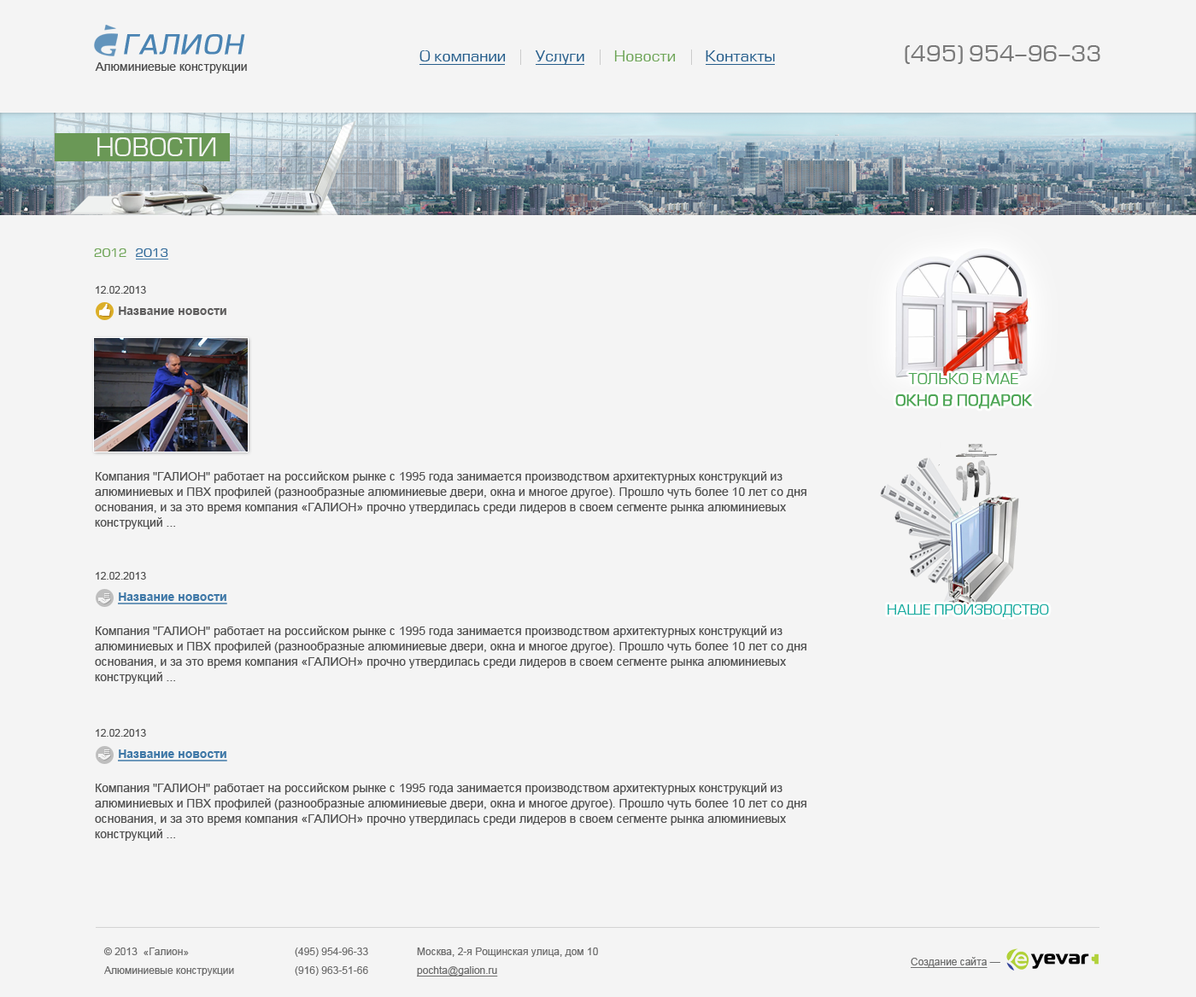
<style>
.page{position:relative;width:1196px;height:997px;background:#f4f4f4}
.page>*{position:absolute;margin:0}
.t1{font:25.6px "Europe-Italic";letter-spacing:0.06em;color:#4a84b3;font-weight:bold}
.t2{font:15.4px "EuropeNormal";color:#275e8b}
.t3{font:15.4px "EuropeNormal";color:#70a559}
.t4{font:22.2px "EuropeNormal";color:#797979}
.t5{font:12px "ArialMT";color:#4b4b4b}
.t6{font:24.8px "EuropeNormal";color:#f4f4f4;text-transform:uppercase}
.t7{font:12px "EuropeNormal";color:#70a559;text-transform:uppercase}
.t8{font:12px "EuropeNormal";color:#346c9b;text-transform:uppercase}
.t9{font:12px/15.4px "ArialMT";color:#515151}
.t10{font:10.2px/18.8px "ArialMT";color:#515151}
.t11{font:12px/21.3px "Arial-BoldMT";color:#5f5e5e}
.t12{font:14.5px/21.3px "EuropeNormal";color:#4ca554;text-transform:uppercase;font-weight:bold}
.t13{font:14.5px/19.6px "EuropeNormal";color:#4ca554;text-transform:uppercase}
.t14{font:12px/21.3px "Arial-BoldMT";color:#3f78a7;text-decoration:underline}
.t15{font:13.7px "EuropeNormal";color:#14a99d;text-transform:uppercase}
.t16{font:10.2px/18.8px "ArialMT";color:#6d6d6d}
.t17{font:10.2px/18.8px "ArialMT";color:#6d6d6d;text-decoration:underline}
.t18{font:10.2px "ArialMT";color:#6d6d6d;text-decoration:underline}
.t19{font:10.2px "ArialMT";color:#6d6d6d}
</style>
<div class="page">
<p class="t1" style="left:124px;top:34px;width:121px;height:21px">ГАЛИОН</p>
<p class="t2" style="left:419px;top:50px;width:356px;height:15px">О компании        Услуги        <span class="t3">Новости</span>        Контакты</p>
<p class="t4" style="left:904px;top:45px;width:196px;height:19px">(495) 954-96-33</p>
<p class="t5" style="left:95px;top:62px;width:152px;height:11px">Алюминиевые конструкции</p>
<p class="t6" style="left:97px;top:137px;width:119px;height:19px">НОВОСТИ</p>
<p class="t7" style="left:94px;top:248px;width:74px;height:9px">2012   <span class="t8">2013</span></p>
<p class="t9" style="left:95px;top:286px;width:711px;height:243px"><span class="t10">12.02.2013<br>       </span><span class="t11">Название новости<br><br><br><br><br><br><br><br><br></span>Компания "ГАЛИОН" работает на российском рынке с 1995 года занимается производством архитектурных конструкций из алюминиевых и ПВХ профилей (разнообразные алюминиевые двери, окна и многое другое). Прошло чуть более 10 лет со дня основания, и за это время компания «ГАЛИОН» прочно утвердилась среди лидеров в своем сегменте рынка алюминиевых конструкций ...</p>
<p class="t12" style="left:895px;top:373px;width:137px;height:36px;text-align:center"><span class="t13">Только в мае<br></span>Окно в подарок</p>
<p class="t9" style="left:95px;top:572px;width:711px;height:112px"><span class="t10">12.02.2013<br>       </span><span class="t14">Название новости<br><br></span>Компания "ГАЛИОН" работает на российском рынке с 1995 года занимается производством архитектурных конструкций из алюминиевых и ПВХ профилей (разнообразные алюминиевые двери, окна и многое другое). Прошло чуть более 10 лет со дня основания, и за это время компания «ГАЛИОН» прочно утвердилась среди лидеров в своем сегменте рынка алюминиевых конструкций ...</p>
<p class="t15" style="left:887px;top:605px;width:162px;height:12px">НАШЕ ПРОИЗВОДСТВО</p>
<p class="t9" style="left:95px;top:729px;width:711px;height:112px"><span class="t10">12.02.2013<br>       </span><span class="t14">Название новости<br><br></span>Компания "ГАЛИОН" работает на российском рынке с 1995 года занимается производством архитектурных конструкций из алюминиевых и ПВХ профилей (разнообразные алюминиевые двери, окна и многое другое). Прошло чуть более 10 лет со дня основания, и за это время компания «ГАЛИОН» прочно утвердилась среди лидеров в своем сегменте рынка алюминиевых конструкций ...</p>
<p class="t16" style="left:103px;top:948px;width:131px;height:28px">© 2013  «Галион»<br>Алюминиевые конструкции</p>
<p class="t16" style="left:295px;top:948px;width:73px;height:28px">(495) 954-96-33<br>(916) 963-51-66</p>
<p class="t16" style="left:417px;top:948px;width:181px;height:29px">Москва, 2-я Рощинская улица, дом 10<br><span class="t17">pochta@galion.ru</span></p>
<p class="t18" style="left:910px;top:957px;width:90px;height:11px">Создание сайта<span class="t19"> —</span></p>
</div>
